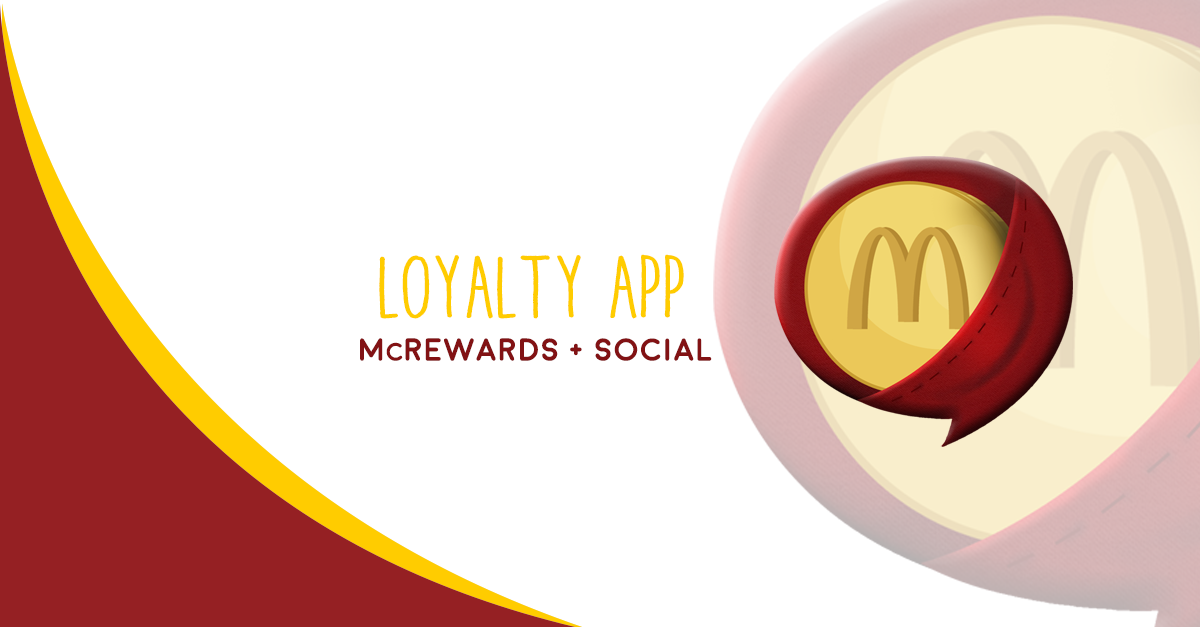
<style>
.page{position:relative;width:1200px;height:627px;background:#ffffff}
.page>*{position:absolute;margin:0}
.t1{font:88.3px "AracneCondensedRegular";color:#ffcc00}
.t2{font:31.7px "Moon-Bold";color:#821214}
.t3{font:25.5px "Moon-Bold";color:#821214}
</style>
<div class="page">
<p class="t1" style="left:379px;top:254px;width:305px;height:65px">Loyalty APP</p>
<p class="t2" style="left:360px;top:338px;width:352px;height:23px">M<span class="t3">c</span>Rewards + social</p>
</div>
